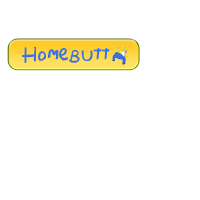
<style>
.page{position:relative;width:200px;height:200px;background:#ffffff}
.page>*{position:absolute;margin:0}
.t1{font:18px "Originally-compiled-by-Jon-Bernhardt.";color:#3d71e5}
</style>
<div class="page">
<p class="t1" style="left:22px;top:46px;width:88px;height:17px">Homebutt</p>
</div>
